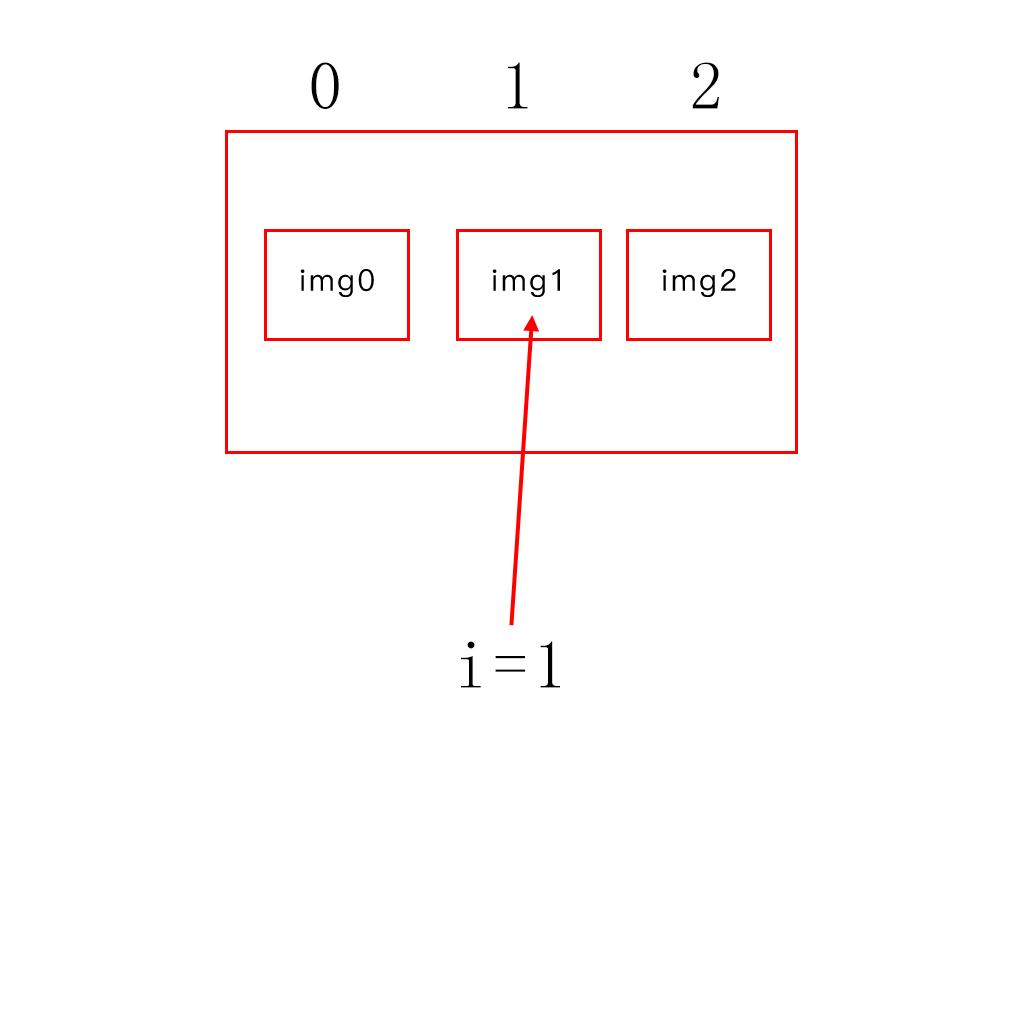
<style>
.page{position:relative;width:1024px;height:1024px;background:#ffffff}
.page>*{position:absolute;margin:0}
.t1{font:67.9px "LiSu";letter-spacing:0.08em;color:#000000}
.t2{font:30px "PingFang-SC-Medium";letter-spacing:0.08em;color:#000000}
</style>
<div class="page">
<p class="t1" style="left:311px;top:62px;width:28px;height:47px">0</p>
<p class="t1" style="left:508px;top:62px;width:20px;height:47px">1</p>
<p class="t1" style="left:692px;top:62px;width:27px;height:47px">2</p>
<p class="t2" style="left:300px;top:269px;width:74px;height:28px">img0</p>
<p class="t2" style="left:492px;top:269px;width:68px;height:28px">img1</p>
<p class="t2" style="left:662px;top:269px;width:74px;height:28px">img2</p>
<p class="t1" style="left:461px;top:641px;width:99px;height:47px">i=1</p>
</div>
